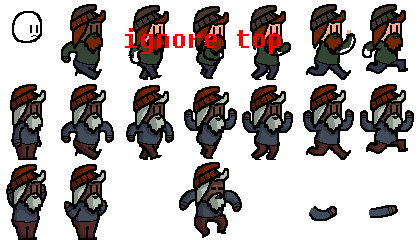
<style>
.page{position:relative;width:420px;height:240px;background:#ffffff}
.page>*{position:absolute;margin:0}
.t1{font:25px "Fixedsys";color:#ff0000}
</style>
<div class="page">
<p class="t1" style="left:125px;top:28px;width:156px;height:26px">ignore top</p>
</div>
